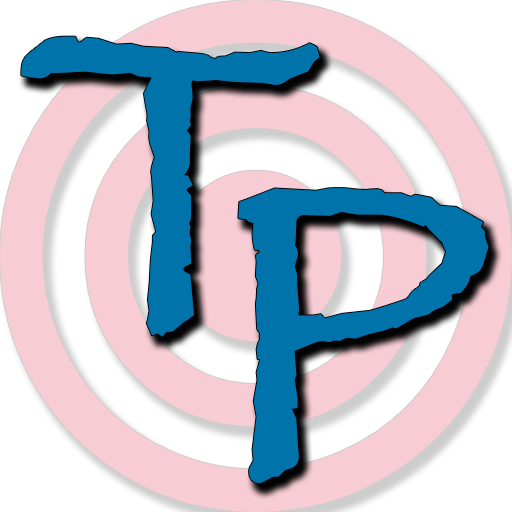
<style>
.page{position:relative;width:512px;height:512px;background:#f7ccd4}
.page>*{position:absolute;margin:0}
.t1{font:419.6px "Papyrus";color:#0073aa;font-weight:bold}
</style>
<div class="page">
<p class="t1" style="left:21px;top:36px;width:299px;height:301px">T</p>
<p class="t1" style="left:238px;top:188px;width:251px;height:295px">P</p>
</div>
